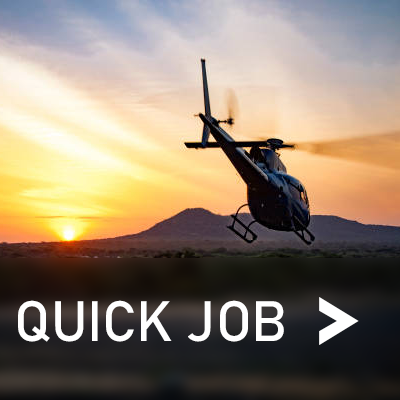
<style>
.page{position:relative;width:400px;height:400px}
.page>*{position:absolute;margin:0}
.t1{font:56px "Bahnschrift";color:#ffffff}
.t2{font:120px "Bahnschrift";color:#ffffff}
</style>
<div class="page">
<p class="t1" style="left:18px;top:300px;width:266px;height:42px">QUICK JOB</p>
<p class="t2" style="left:319px;top:297px;width:40px;height:48px">&gt;</p>
</div>
